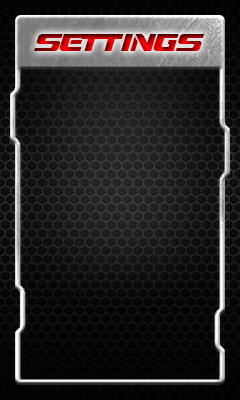
<style>
.page{position:relative;width:240px;height:400px}
.page>*{position:absolute;margin:0}
.t1{font:24px "DreamMMA"}
</style>
<div class="page">
<p class="t1" style="left:34px;top:34px;width:171px;height:17px">settings</p>
</div>
